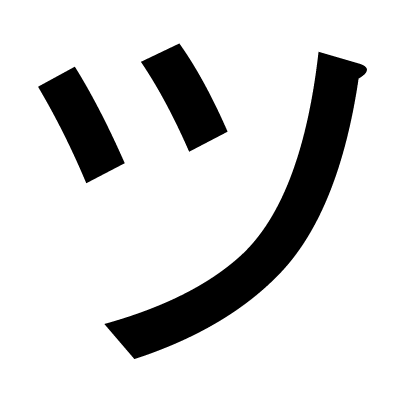
<style>
.page{position:relative;width:400px;height:400px;background:#ffffff}
.page>*{position:absolute;margin:0}
.t1{font:424.8px "MS-PGothic";color:#000000}
</style>
<div class="page">
<p class="t1" style="left:38px;top:43px;width:329px;height:316px">ツ</p>
</div>
